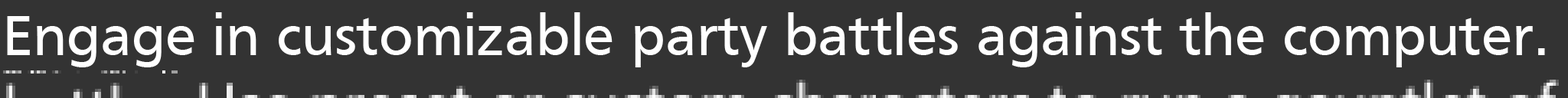
<style>
.page{position:relative;width:1568px;height:98px;background:#333333}
.page>*{position:absolute;margin:0}
.t1{font:59.1px "Frutiger";color:#ffffff}
</style>
<div class="page">
<p class="t1" style="left:7px;top:12px;width:1538px;height:55px">Engage in customizable party battles against the computer.</p>
</div>
